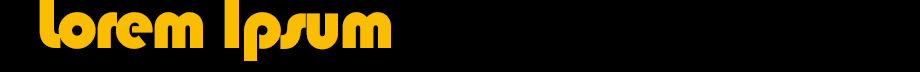
<style>
.page{position:relative;width:920px;height:72px;background:#000000}
.page>*{position:absolute;margin:0}
.t1{font:72px "Bauhaus93";letter-spacing:-0.04em;color:#fbbd00}
</style>
<div class="page">
<p class="t1" style="left:39px;top:0px;width:352px;height:61px">Lorem Ipsum</p>
</div>
